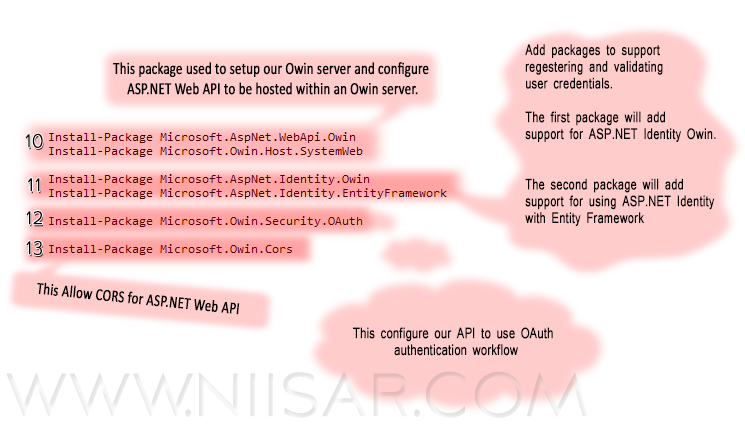
<style>
.page{position:relative;width:745px;height:431px;background:#ffffff}
.page>*{position:absolute;margin:0}
.t1{font:14px "Mangal";color:#000000;font-weight:bold;scale:0.76 1}
.t2{font:16.9px "Calibri";color:#000000;font-weight:bold;scale:0.75 1}
.t3{font:22.7px "AvianoSansLight";color:#000000;font-weight:bold;scale:0.76 1}
.t4{font:13.9px "Mangal";color:#000000;font-weight:bold;scale:0.77 1}
.t5{font:84px "AvianoSansLight";color:#ece9e9;font-weight:bold;scale:0.76 1}
</style>
<div class="page">
<p class="t1" style="left:525px;top:44px;width:191px;height:182px">Add packages to support <br>regestering and validating <br>user credentials.<br><br>The first package will add <br>support for ASP.NET Identity Owin.<br><br><br>The second package will add <br>support for using ASP.NET Identity <br>with Entity Framework</p>
<p class="t2" style="left:113px;top:62px;width:316px;height:33px;text-align:center">This package used to setup our Owin server and configure <br>ASP.NET Web API to be hosted within an Owin server.</p>
<p class="t3" style="left:25px;top:133px;width:18px;height:15px">10</p>
<p class="t3" style="left:28px;top:178px;width:12px;height:14px">11</p>
<p class="t3" style="left:26px;top:211px;width:16px;height:14px">12</p>
<p class="t3" style="left:26px;top:240px;width:16px;height:15px">13</p>
<p class="t2" style="left:37px;top:282px;width:203px;height:33px;rotate:6deg">This Allow CORS for ASP.NET Web API</p>
<p class="t4" style="left:353px;top:327px;width:200px;height:29px;text-align:center">This configure our API to use OAuth <br>authentication workflow</p>
<p class="t5" style="left:6px;top:371px;width:582px;height:47px">www.niisar.com</p>
</div>
